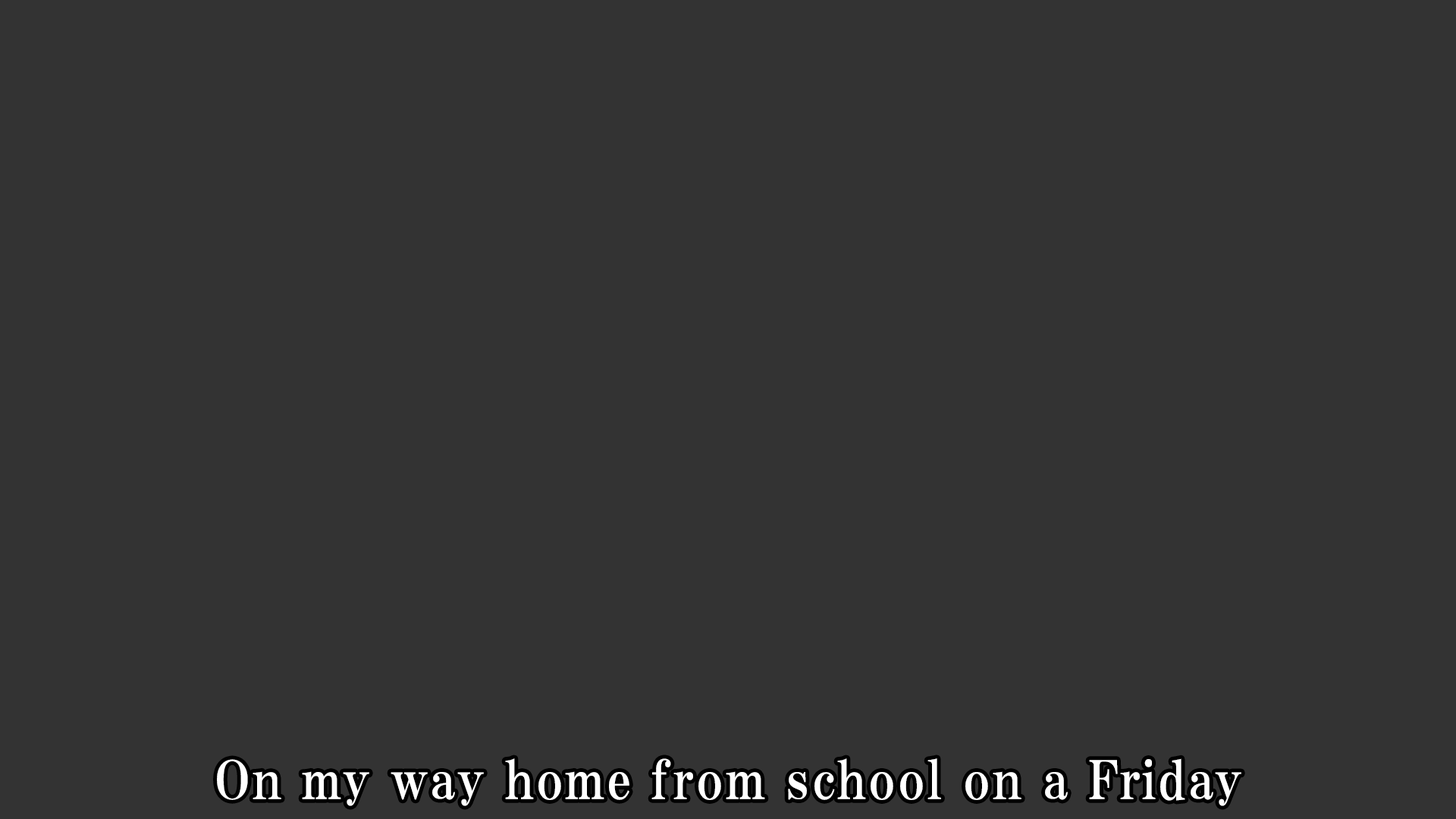
<style>
.page{position:relative;width:1456px;height:819px;background:#333333}
.page>*{position:absolute;margin:0}
.t1{font:53.1px "HGPMinchoE";letter-spacing:0.025em;color:#ffffff}
</style>
<div class="page">
<p class="t1" style="left:217px;top:758px;width:1024px;height:48px">On my way home from school on a Friday</p>
</div>
